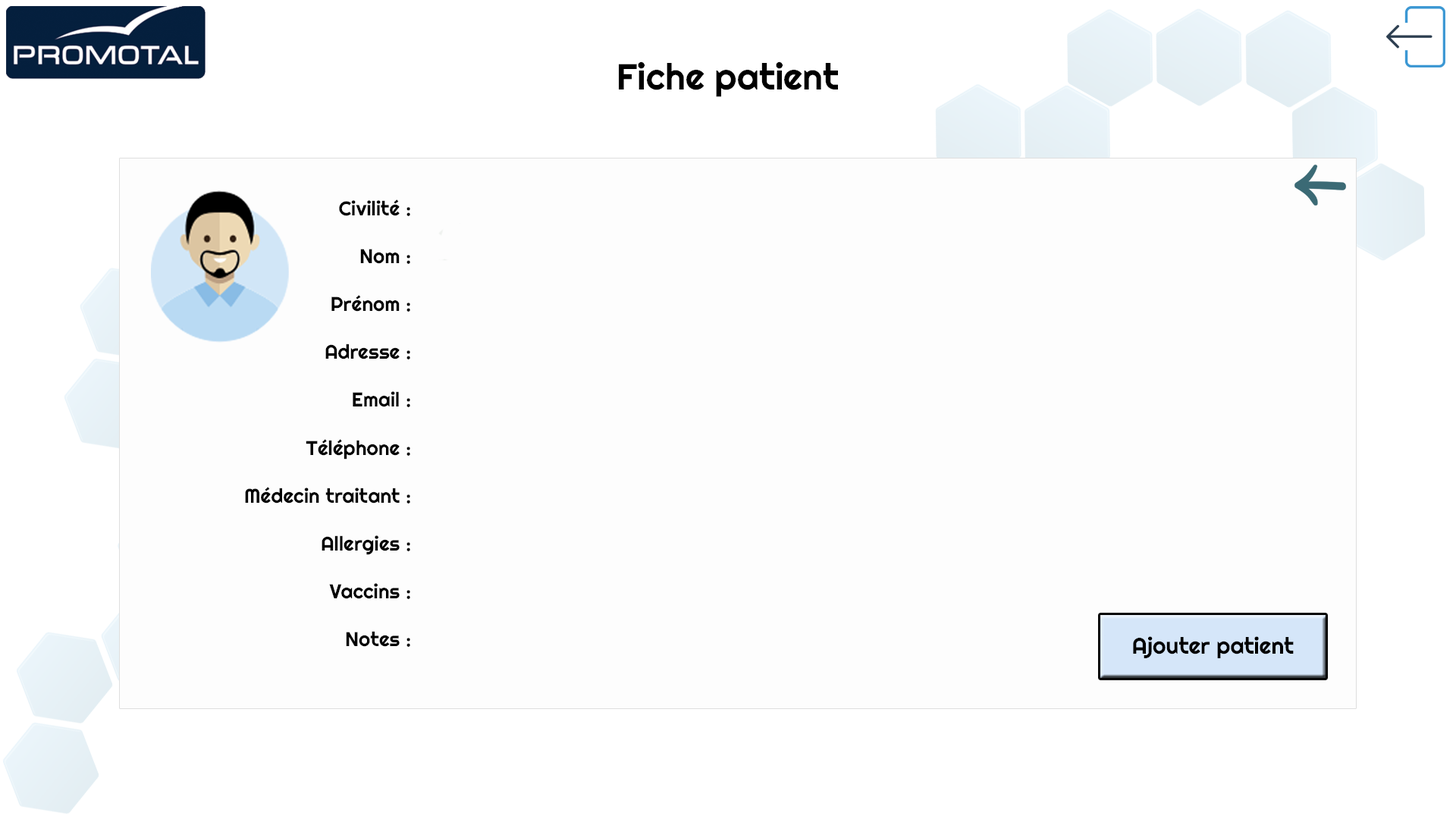
<style>
.page{position:relative;width:1456px;height:819px;background:#fdfdfd}
.page>*{position:absolute;margin:0}
.t1{font:36.4px "Righteous-Regular";color:#000000}
.t2{font:20px "Righteous-Regular";color:#000000}
.t3{font:22.8px "Righteous-Regular";color:#000000}
</style>
<div class="page">
<p class="t1" style="left:619px;top:61px;width:219px;height:36px">Fiche patient</p>
<p class="t2" style="left:245px;top:199px;width:165px;height:448px;text-align:right">Civilité :<br><br>Nom :<br><br>Prénom :<br><br>Adresse :<br><br>Email :<br><br>Téléphone :<br><br>Médecin traitant :<br><br>Allergies :<br><br>Vaccins :<br><br>Notes :</p>
<p class="t3" style="left:1133px;top:636px;width:161px;height:22px">Ajouter patient</p>
</div>
